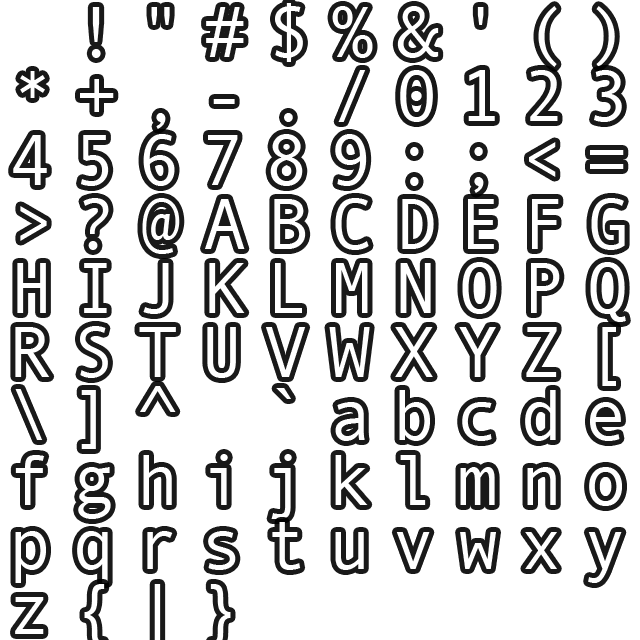
<style>
.page{position:relative;width:640px;height:640px;background:#ffffff}
.page>*{position:absolute;margin:0}
.t1{font:72px "AndaleMono";letter-spacing:0.289em;color:#ffffff}
</style>
<div class="page">
<p class="t1" style="left:91px;top:3px;width:524px;height:64px">!"#$%&amp;'()</p>
<p class="t1" style="left:20px;top:70px;width:602px;height:59px">*+,-./0123</p>
<p class="t1" style="left:13px;top:134px;width:611px;height:59px">456789:;&lt;=</p>
<p class="t1" style="left:20px;top:198px;width:605px;height:56px">&gt;?@ABCDEFG</p>
<p class="t1" style="left:17px;top:262px;width:609px;height:60px">HIJKLMNOPQ</p>
<p class="t1" style="left:15px;top:326px;width:601px;height:60px">RSTUVWXYZ[</p>
<p class="t1" style="left:15px;top:386px;width:606px;height:63px">\]^ `abcde</p>
<p class="t1" style="left:15px;top:454px;width:607px;height:65px">fghijklmno</p>
<p class="t1" style="left:15px;top:522px;width:607px;height:61px">pqrstuvwxy</p>
</div>
